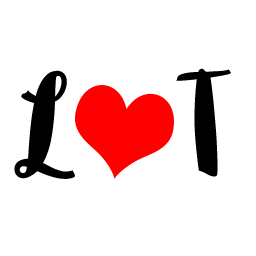
<style>
.page{position:relative;width:256px;height:256px;background:#ffffff}
.page>*{position:absolute;margin:0}
.t1{font:144px "Sophia";letter-spacing:-0.01em;color:#000000}
</style>
<div class="page">
<p class="t1" style="left:14px;top:70px;width:61px;height:109px">L</p>
<p class="t1" style="left:176px;top:68px;width:55px;height:109px">T</p>
</div>
